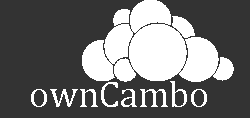
<style>
.page{position:relative;width:250px;height:118px;background:#333333}
.page>*{position:absolute;margin:0}
.t1{font:37.5px "Cambria";color:#ffffff}
</style>
<div class="page">
<p class="t1" style="left:31px;top:81px;width:176px;height:26px">ownCambo</p>
</div>
